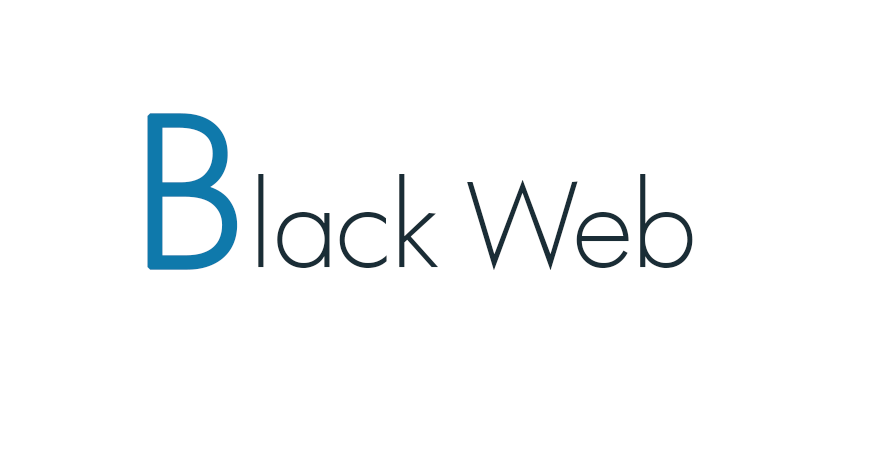
<style>
.page{position:relative;width:886px;height:472px;background:#ffffff}
.page>*{position:absolute;margin:0}
.t1{font:113.2px "LuzSans-Light";color:#1a2d36}
.t2{font:200px "LuzSans-Light";color:#0f79ab;font-weight:bold}
</style>
<div class="page">
<p class="t1" style="left:147px;top:113px;width:546px;height:157px"><span class="t2">B</span>lack Web</p>
</div>
